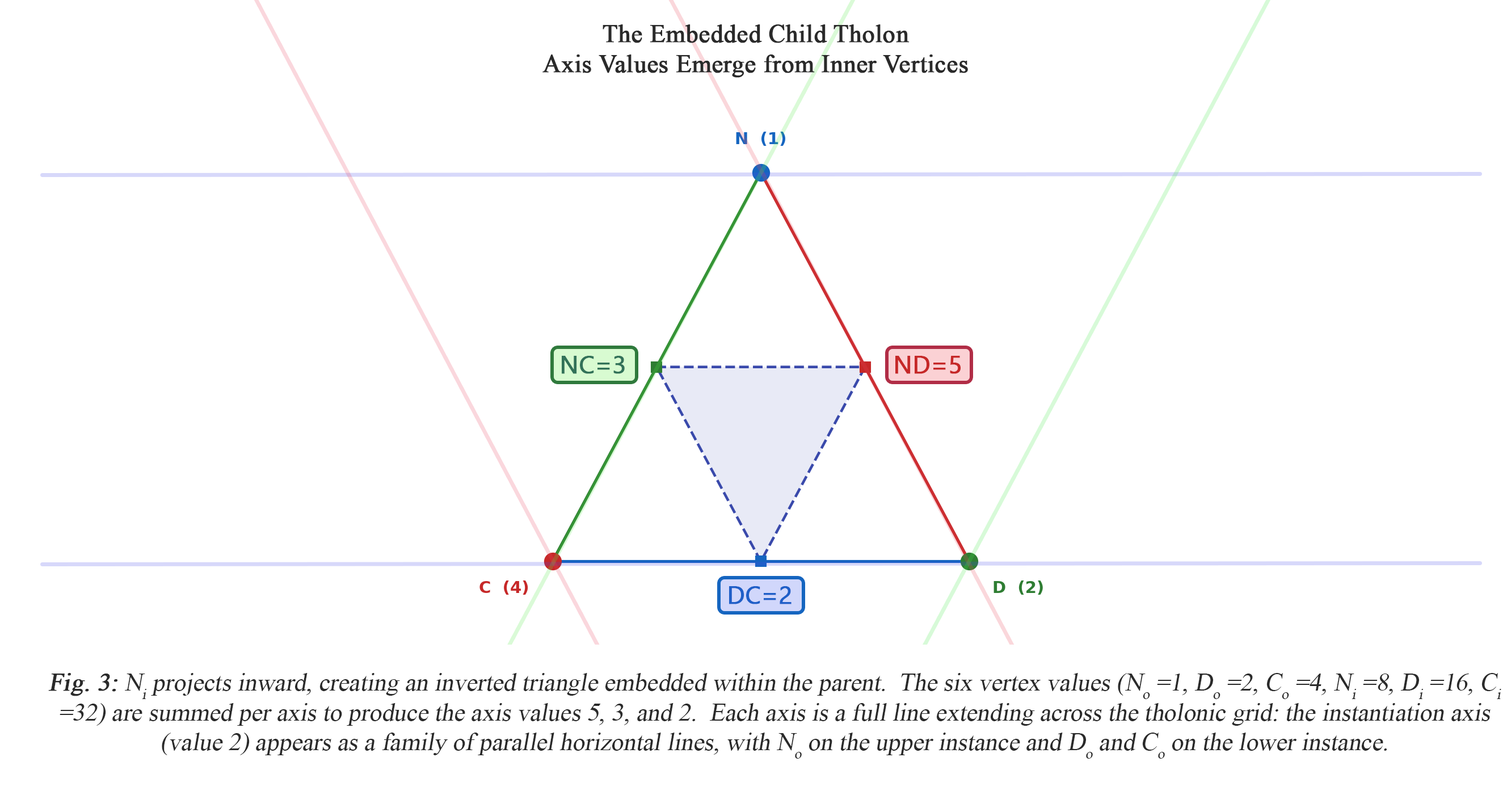
<style>
.page{position:relative;width:1507px;height:791px;background:#ffffff}
.page>*{position:absolute;margin:0}
.t1{font:24.8px "TimesNewRomanPSMT";color:#2a2a2a;font-weight:bold}
.t2{font:24.8px "SegoeUISymbol";color:#327259;font-weight:bold}
.t3{font:24.8px "SegoeUISymbol";color:#c62828;font-weight:bold}
.t4{font:24.8px "SegoeUISymbol";color:#1f5fc8;font-weight:bold}
.t5{font:24.8px "TimesNewRomanPSMT";color:#2a2a2a;font-style:italic}
.t6{font:24.8px "TimesNewRomanPSMT";color:#2a2a2a;font-weight:bold;font-style:italic}
</style>
<div class="page">
<p class="t1" style="left:543px;top:24px;width:425px;height:54px;text-align:center">The Embedded Child Tholon<br>Axis Values Emerge from Inner Vertices</p>
<p class="t2" style="left:562px;top:356px;width:63px;height:18px">NC=3</p>
<p class="t3" style="left:896px;top:356px;width:65px;height:18px">ND=5</p>
<p class="t4" style="left:729px;top:586px;width:63px;height:18px">DC=2</p>
<p class="t5" style="left:48px;top:673px;width:1454px;height:86px;text-align:center"><span class="t6">Fig. 3:</span> Ni projects inward, creating an inverted triangle embedded within the parent.  The six vertex values (No =1, Do =2, Co =4, Ni =8, Di =16, Ci =32) are summed per axis to produce the axis values 5, 3, and 2.  Each axis is a full line extending across the tholonic grid: the instantiation axis (value 2) appears as a family of parallel horizontal lines, with No on the upper instance and Do and Co on the lower instance.</p>
</div>
